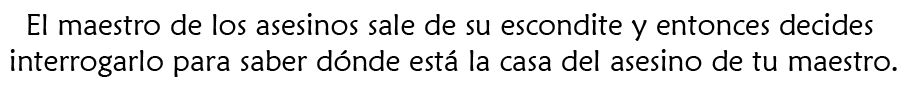
<style>
.page{position:relative;width:899px;height:85px;background:#ffffff}
.page>*{position:absolute;margin:0}
.t1{font:30px "MaiandraGD-Regular";color:#000000}
</style>
<div class="page">
<p class="t1" style="left:10px;top:13px;width:887px;height:64px;text-align:center">El maestro de los asesinos sale de su escondite y entonces decides <br>interrogarlo para saber dónde está la casa del asesino de tu maestro.</p>
</div>
